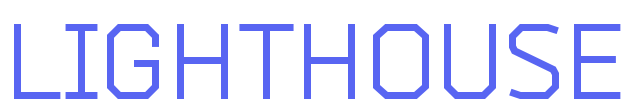
<style>
.page{position:relative;width:621px;height:112px;background:#ffffff}
.page>*{position:absolute;margin:0}
.t1{font:107px "Bender";letter-spacing:0.02em;color:#5865f2}
</style>
<div class="page">
<p class="t1" style="left:14px;top:24px;width:607px;height:75px">LIGHTHOUSE</p>
</div>
